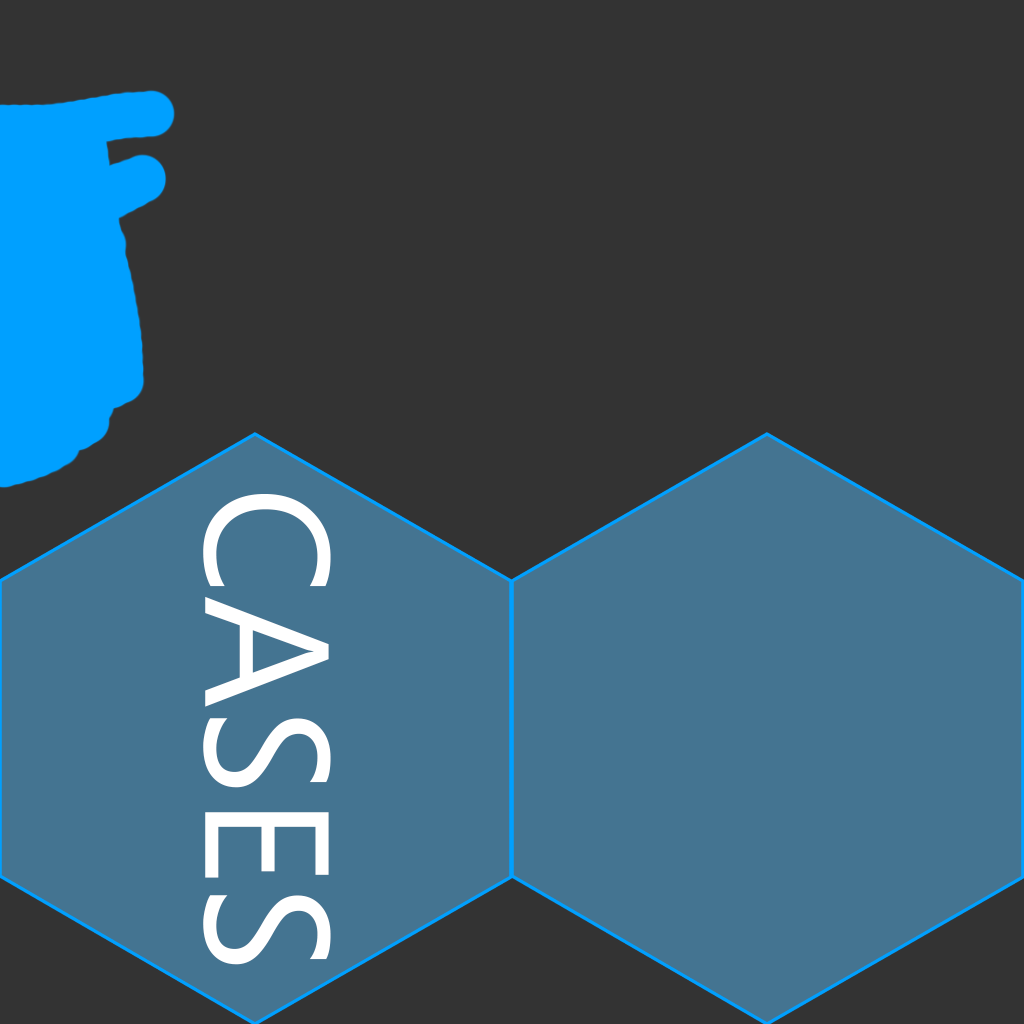
<style>
.page{position:relative;width:1024px;height:1024px;background:#333333}
.page>*{position:absolute;margin:0}
.t1{font:176px "SegoeUI-Regular";color:#ffffff}
</style>
<div class="page">
<p class="t1" style="left:203px;top:494px;width:128px;height:471px;rotate:90deg">CASES</p>
</div>
